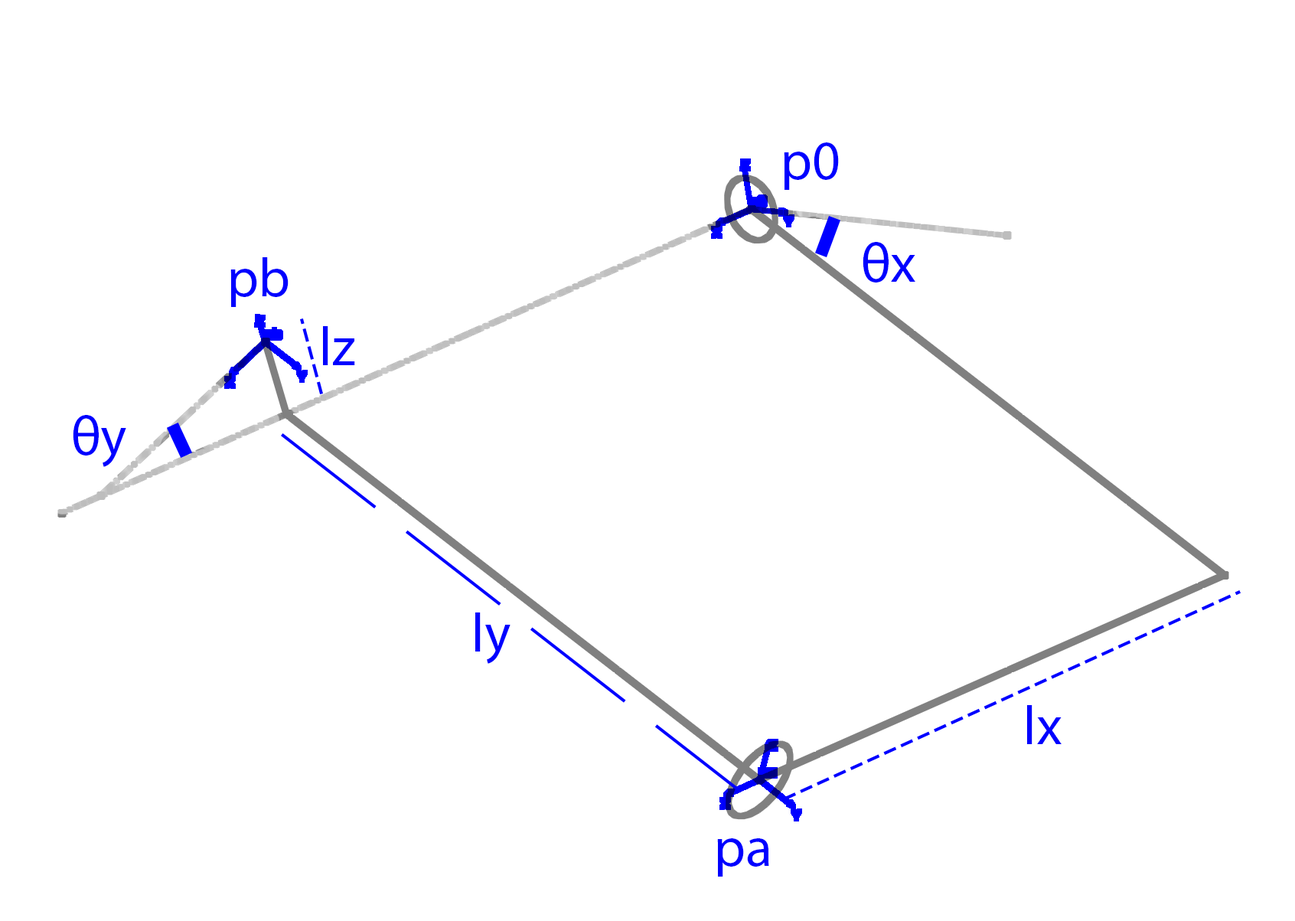
<style>
.page{position:relative;width:1295px;height:921px;background:#ffffff}
.page>*{position:absolute;margin:0}
.t1{font:55.1px "Gulim";color:#0000ff}
</style>
<div class="page">
<p class="t1" style="left:784px;top:142px;width:55px;height:48px">p0</p>
<p class="t1" style="left:863px;top:242px;width:52px;height:40px">θx</p>
<p class="t1" style="left:230px;top:257px;width:59px;height:50px">pb</p>
<p class="t1" style="left:323px;top:326px;width:32px;height:39px">lz</p>
<p class="t1" style="left:73px;top:415px;width:53px;height:52px">θy</p>
<p class="t1" style="left:475px;top:612px;width:36px;height:52px">ly</p>
<p class="t1" style="left:1027px;top:705px;width:35px;height:39px">lx</p>
<p class="t1" style="left:717px;top:838px;width:52px;height:38px">pa</p>
</div>
